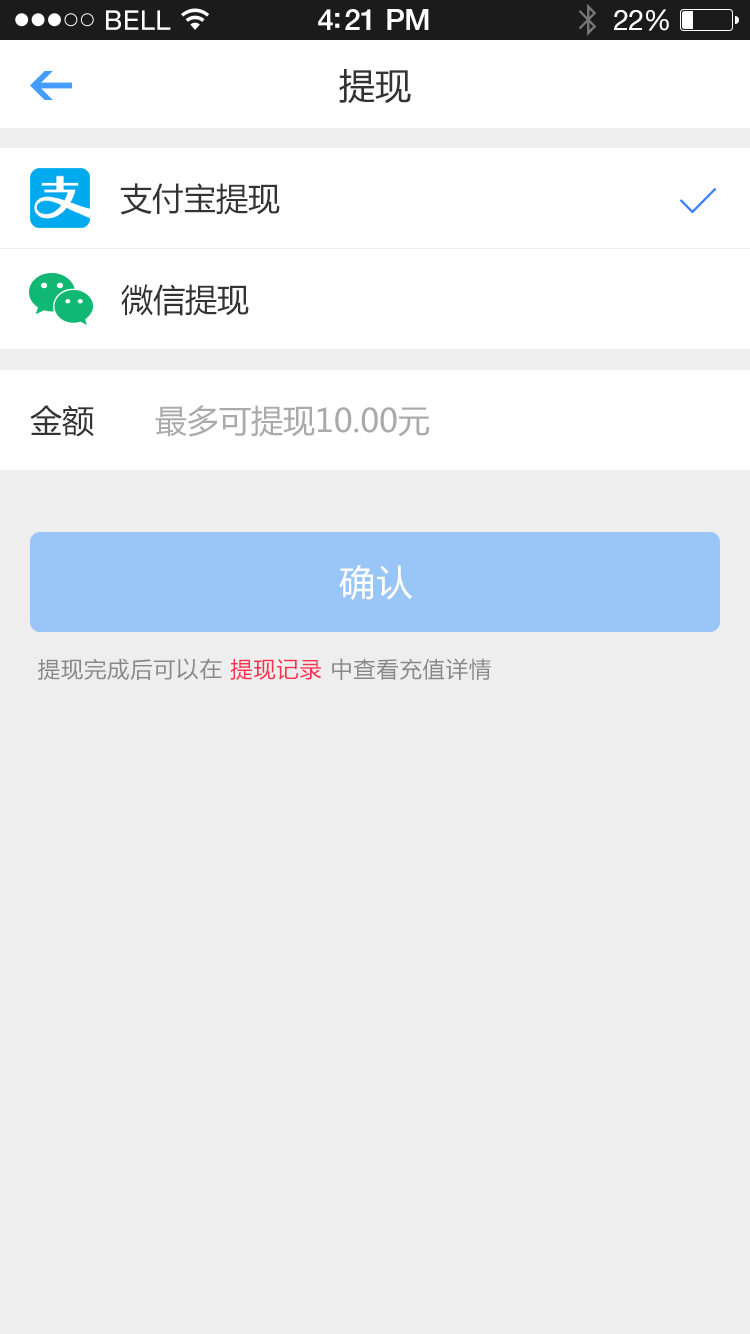
<style>
.page{position:relative;width:750px;height:1334px;background:#eeeeee}
.page>*{position:absolute;margin:0}
.t1{font:36px "MicrosoftYaHei";color:#333333}
.t2{font:32px "MicrosoftYaHei";color:#333333}
.t3{font:32px "MicrosoftYaHei";color:#aaaaaa}
.t4{font:36px "MicrosoftYaHei";letter-spacing:0.05em;color:#ffffff}
.t5{font:22px "MicrosoftYaHei";letter-spacing:0.05em;color:#888888}
.t6{font:22px "MicrosoftYaHei";letter-spacing:0.05em;color:#ff2e50}
</style>
<div class="page">
<p class="t1" style="left:339px;top:69px;width:72px;height:35px">提现</p>
<p class="t2" style="left:120px;top:183px;width:160px;height:32px">支付宝提现</p>
<p class="t2" style="left:121px;top:284px;width:128px;height:32px">微信提现</p>
<p class="t2" style="left:30px;top:405px;width:64px;height:32px">金额</p>
<p class="t3" style="left:155px;top:405px;width:275px;height:32px">最多可提现10.00元</p>
<p class="t4" style="left:339px;top:565px;width:74px;height:35px">确认</p>
<p class="t5" style="left:38px;top:658px;width:453px;height:22px">提现完成后可以在 <span class="t6">提现记录</span> 中查看充值详情</p>
</div>
